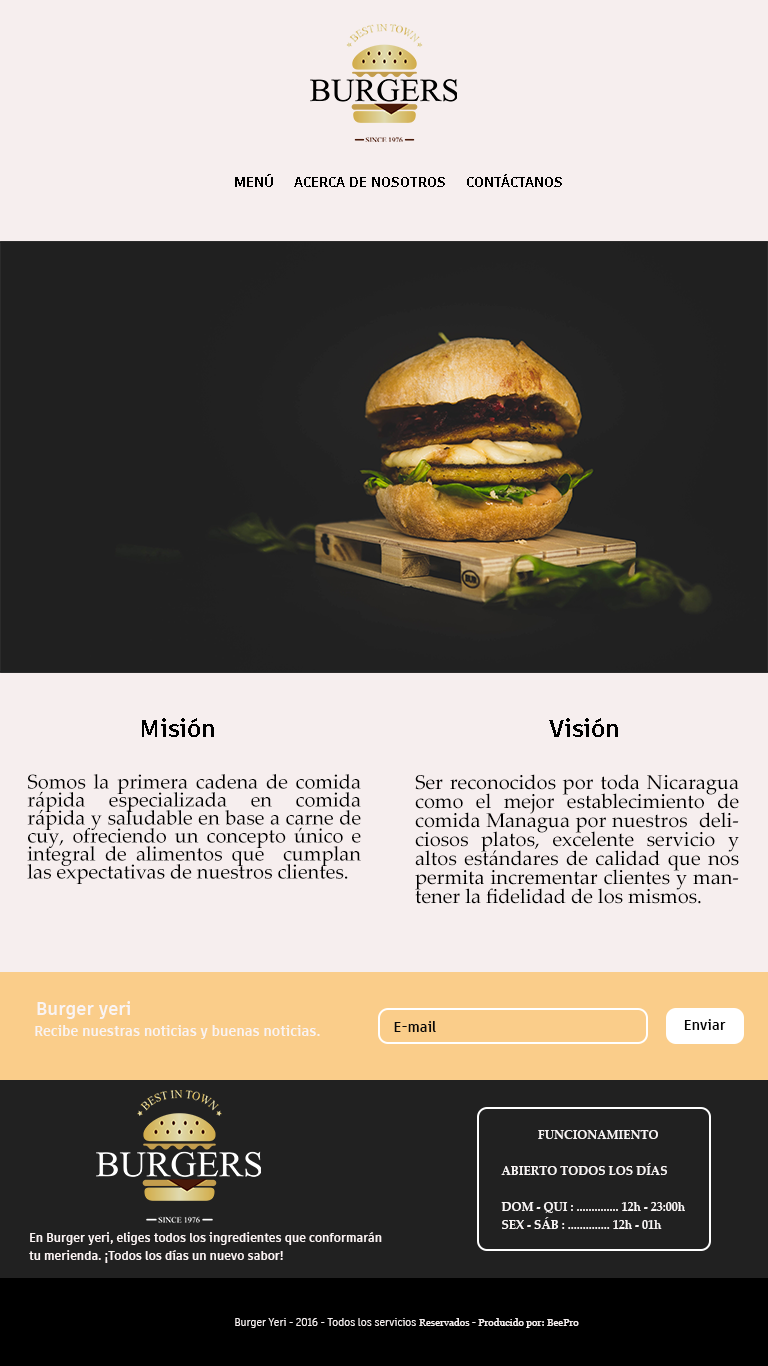
<style>
.page{position:relative;width:768px;height:1366px;background:#f6eeee}
.page>*{position:absolute;margin:0}
.t1{font:14px "ArtifaktElement-Bold";color:#000000}
.t2{font:24px "ArtifaktElement-Bold";color:#000000}
.t3{font:20px/18px "PalatinoLinotype-Roman";color:#000000}
.t4{font:20px/19px "PalatinoLinotype-Roman";color:#000000}
.t5{font:18px "ArtifaktElement-Bold";color:#f9f4f4}
.t6{font:14px "ArtifaktElement-Bold";color:#f9f4f4}
.t7{font:14px "ArtifaktElement-Bold";color:#090909}
.t8{font:14px "ArtifaktElement-Bold";color:#050505}
.t9{font:12px/18px "PalatinoLinotype-Bold";color:#f9f5f5}
.t10{font:12px/18px "ArtifaktElement-Bold";color:#fcf4f4}
.t11{font:10px "ArtifaktElement-Regular";color:#f6f0f0}
.t12{font:10px "Georgia";color:#f6f0f0}
.t13{font:10px "Georgia";color:#f8f2f2}
</style>
<div class="page">
<p class="t1" style="left:235px;top:174px;width:327px;height:13px">MENÚ     ACERCA DE NOSOTROS     CONTÁCTANOS</p>
<p class="t2" style="left:142px;top:718px;width:72px;height:19px">Misión</p>
<p class="t2" style="left:549px;top:718px;width:69px;height:19px">Visión</p>
<p class="t3" style="left:27px;top:774px;width:334px;height:110px;text-align:justify">Somos la primera cadena de comida rápida especializada en comida rápida y saludable en base a carne de cuy, ofreciendo un concepto único e integral de alimentos que  cumplan las expectativas de nuestros clientes.</p>
<p class="t4" style="left:415px;top:774px;width:324px;height:130px;text-align:justify">Ser reconocidos por toda Nicaragua como el mejor establecimiento de comida Managua por nuestros  deliciosos platos, excelente servicio y altos estándares de calidad que nos permita incrementar clientes y mantener la fidelidad de los mismos.</p>
<p class="t5" style="left:37px;top:1001px;width:93px;height:18px">Burger yeri</p>
<p class="t6" style="left:35px;top:1025px;width:285px;height:14px">Recibe nuestras noticias y buenas noticias.</p>
<p class="t7" style="left:394px;top:1021px;width:42px;height:11px">E-mail</p>
<p class="t8" style="left:684px;top:1019px;width:42px;height:11px">Enviar</p>
<p class="t9" style="left:501px;top:1130px;width:184px;height:99px;text-align:center">FUNCIONAMIENTO<br><br>ABIERTO TODOS LOS DÍAS<br><br>DOM - QUI : .............. 12h - 23:00h<br>SEX - SÁB : .............. 12h - 01h</p>
<p class="t10" style="left:29px;top:1232px;width:353px;height:31px">En Burger yeri, eliges todos los ingredientes que conformarán tu merienda. ¡Todos los días un nuevo sabor!</p>
<p class="t11" style="left:235px;top:1318px;width:344px;height:10px">Burger Yeri - 2016 - Todos los servicios <span class="t12">Reservados -</span><span class="t13"> Producido por: BeePro</span></p>
</div>
